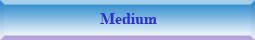
<style>
.page{position:relative;width:255px;height:40px}
.page>*{position:absolute;margin:0}
.t1{font:15.8px "TimesNewRomanPS-BoldMT";color:#2c32d2}
</style>
<div class="page">
<p class="t1" style="left:100px;top:13px;width:57px;height:11px">Medium</p>
</div>
